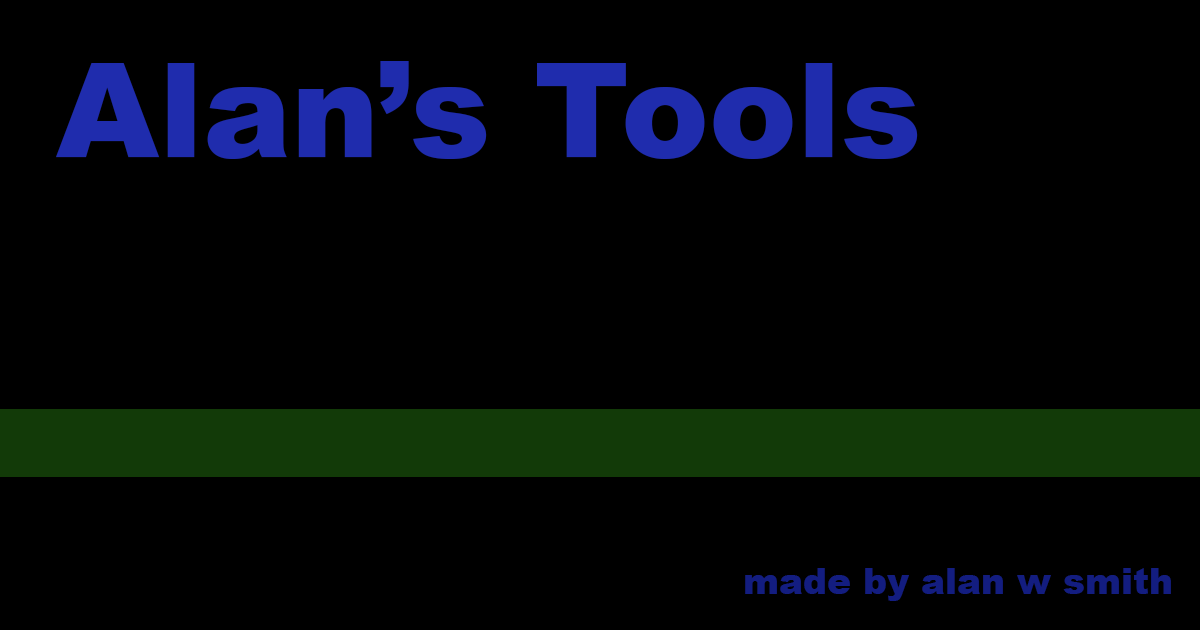
<style>
.page{position:relative;width:1200px;height:630px;background:#000000}
.page>*{position:absolute;margin:0}
.t1{font:132px "Arial-Black";color:#1f2cad}
.t2{font:36px "Arial-Black";color:#131d80}
</style>
<div class="page">
<p class="t1" style="left:56px;top:61px;width:862px;height:98px">Alan’s Tools</p>
<p class="t2" style="left:745px;top:568px;width:426px;height:33px">made by alan w smith</p>
</div>
